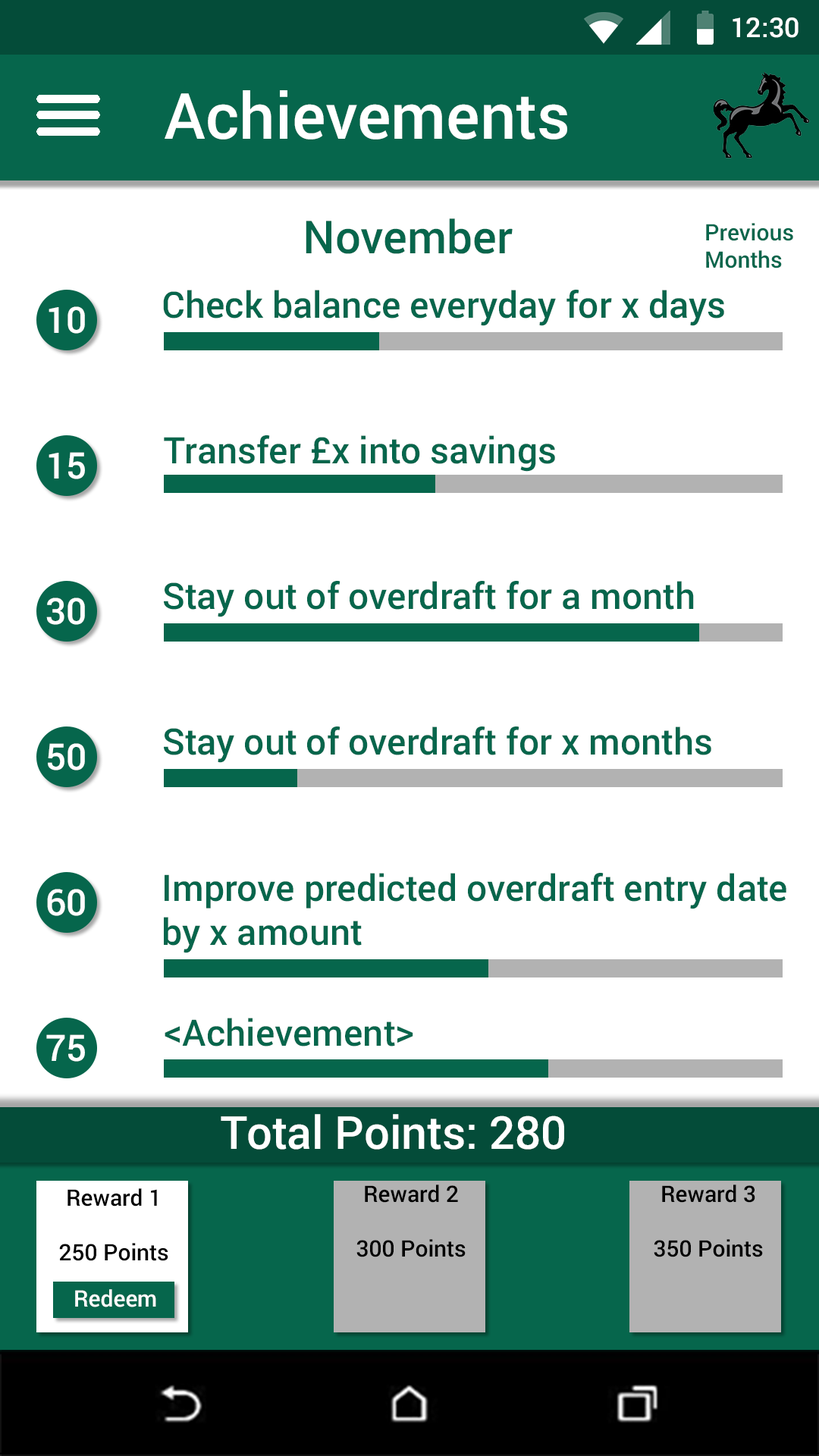
<style>
.page{position:relative;width:819px;height:1456px;background:#ffffff}
.page>*{position:absolute;margin:0}
.t1{font:27.3px "Roboto-Medium";color:#ffffff}
.t2{font:63.7px "Roboto-Medium";color:#ffffff}
.t3{font:45.5px "Roboto-Medium";color:#06664c}
.t4{font:22.7px "Roboto-Medium";color:#06664c}
.t5{font:36.4px "Roboto-Medium";color:#06664c}
.t6{font:36.4px "Roboto-Medium";color:#ffffff}
.t7{font:45.5px "Roboto-Medium";color:#ffffff}
.t8{font:22.7px "Roboto-Medium";color:#000000}
.t9{font:22.7px "Roboto-Medium";color:#ffffff}
</style>
<div class="page">
<p class="t1" style="left:733px;top:17px;width:66px;height:21px">12:30</p>
<p class="t2" style="left:165px;top:90px;width:402px;height:50px">Achievements</p>
<p class="t3" style="left:306px;top:218px;width:207px;height:36px">November</p>
<p class="t4" style="left:706px;top:223px;width:87px;height:45px">Previous<br>Months</p>
<p class="t5" style="left:163px;top:290px;width:561px;height:36px">Check balance everyday for x days</p>
<p class="t6" style="left:49px;top:306px;width:36px;height:28px">10</p>
<p class="t5" style="left:164px;top:435px;width:391px;height:37px">Transfer £x into savings</p>
<p class="t6" style="left:49px;top:452px;width:36px;height:27px">15</p>
<p class="t5" style="left:164px;top:581px;width:530px;height:36px">Stay out of overdraft for a month</p>
<p class="t6" style="left:46px;top:598px;width:39px;height:27px">30</p>
<p class="t5" style="left:164px;top:726px;width:547px;height:37px">Stay out of overdraft for x months</p>
<p class="t6" style="left:48px;top:743px;width:37px;height:27px">50</p>
<p class="t5" style="left:164px;top:873px;width:622px;height:80px">Improve predicted overdraft entry date<br>by x amount</p>
<p class="t6" style="left:47px;top:889px;width:38px;height:27px">60</p>
<p class="t5" style="left:165px;top:1018px;width:248px;height:28px">&lt;Achievement&gt;</p>
<p class="t6" style="left:46px;top:1034px;width:39px;height:28px">75</p>
<p class="t7" style="left:221px;top:1114px;width:343px;height:36px">Total Points: 280</p>
<p class="t8" style="left:59px;top:1188px;width:109px;height:73px;text-align:center">Reward 1<br><br>250 Points</p>
<p class="t8" style="left:356px;top:1185px;width:110px;height:72px;text-align:center">Reward 2<br><br>300 Points</p>
<p class="t8" style="left:654px;top:1185px;width:109px;height:72px;text-align:center">Reward 3<br><br>350 Points</p>
<p class="t9" style="left:75px;top:1289px;width:81px;height:18px">Redeem</p>
</div>
